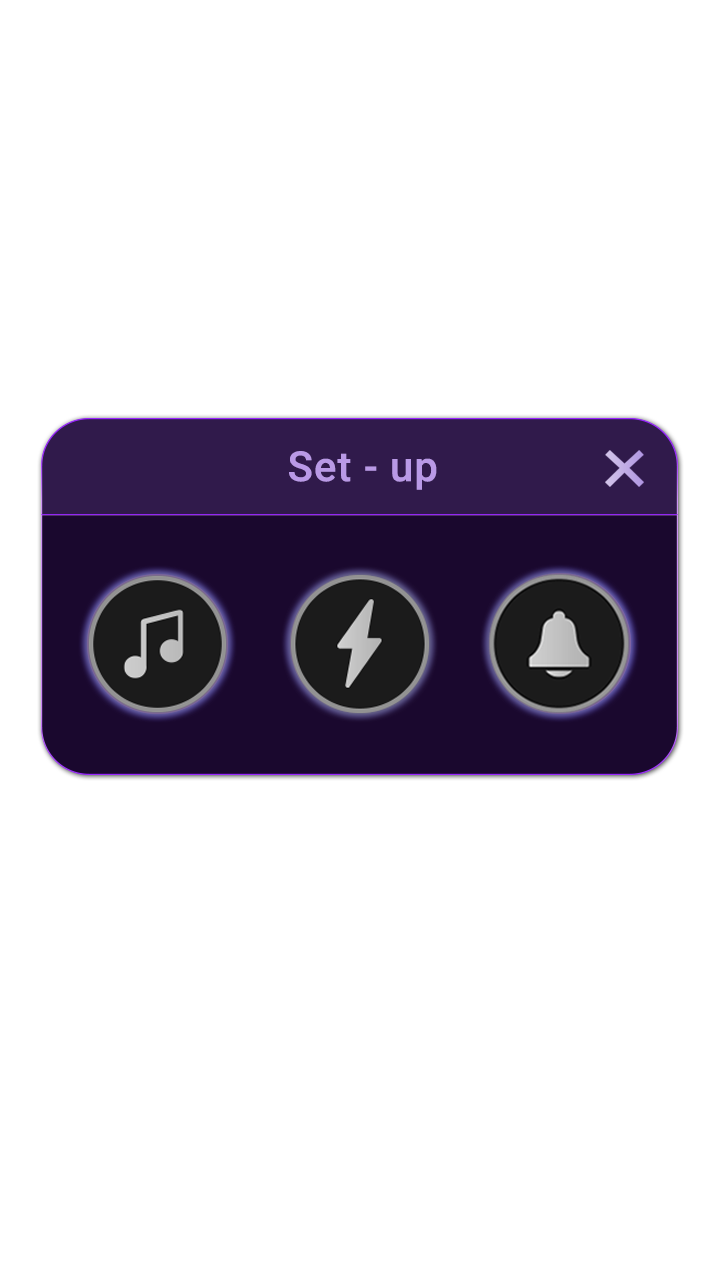
<style>
.page{position:relative;width:720px;height:1280px;background:#ffffff}
.page>*{position:absolute;margin:0}
.t1{font:41.5px "Roboto-Medium";letter-spacing:0.025em;color:#b999e6}
</style>
<div class="page">
<p class="t1" style="left:289px;top:451px;width:148px;height:39px">Set - up</p>
</div>
